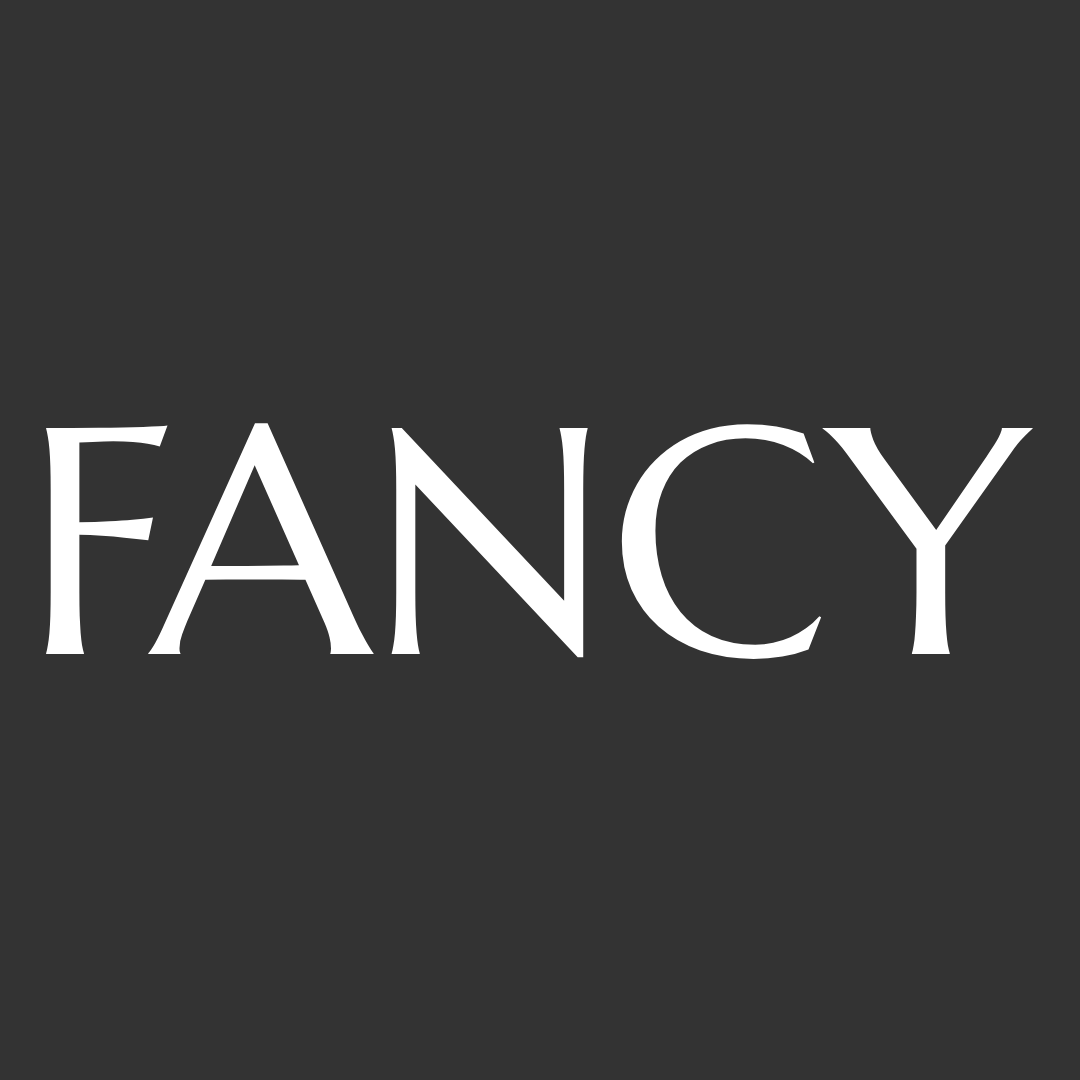
<style>
.page{position:relative;width:1080px;height:1080px;background:#333333}
.page>*{position:absolute;margin:0}
.t1{font:322.9px "Marcellus-Regular";color:#ffffff}
</style>
<div class="page">
<p class="t1" style="left:46px;top:423px;width:987px;height:236px">FANCY</p>
</div>
